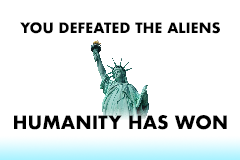
<style>
.page{position:relative;width:240px;height:160px;background:#ffffff}
.page>*{position:absolute;margin:0}
.t1{font:14px "Futura-Bold";color:#000000;text-transform:uppercase}
.t2{font:18px "Futura-Bold";color:#000000;text-transform:uppercase}
</style>
<div class="page">
<p class="t1" style="left:20px;top:22px;width:200px;height:12px">you defeated the aliens</p>
<p class="t2" style="left:14px;top:115px;width:213px;height:15px">humanity has won</p>
</div>
